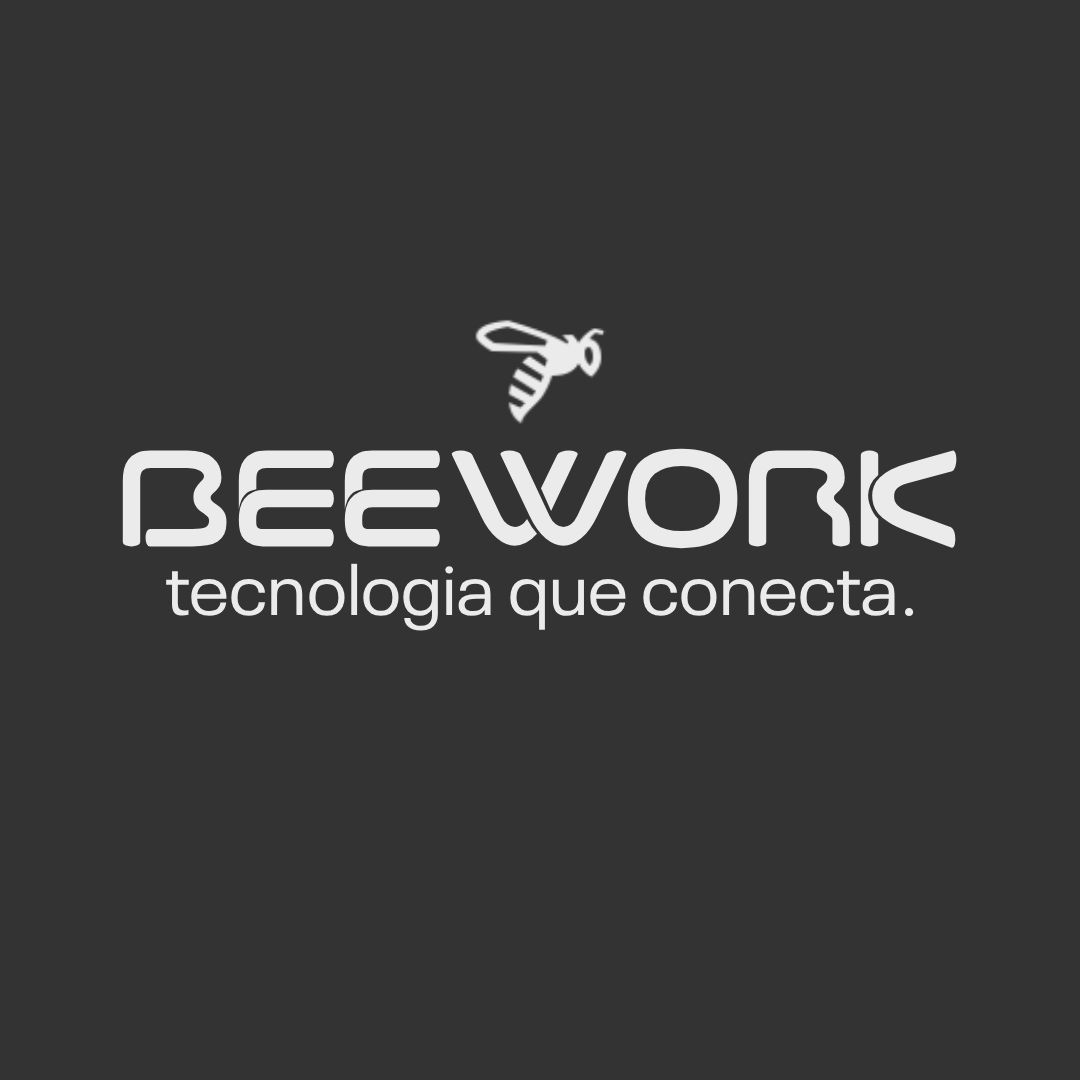
<style>
.page{position:relative;width:1080px;height:1080px;background:#333333}
.page>*{position:absolute;margin:0}
.t1{font:116.1px "AlbiaNovaW01-Regular";color:#ebebeb}
.t2{font:72.5px "NeuePlak-Regular";color:#ebebeb}
</style>
<div class="page">
<p class="t1" style="left:122px;top:448px;width:835px;height:101px">BEEWORK</p>
<p class="t2" style="left:166px;top:563px;width:748px;height:68px">tecnologia que conecta.</p>
</div>
